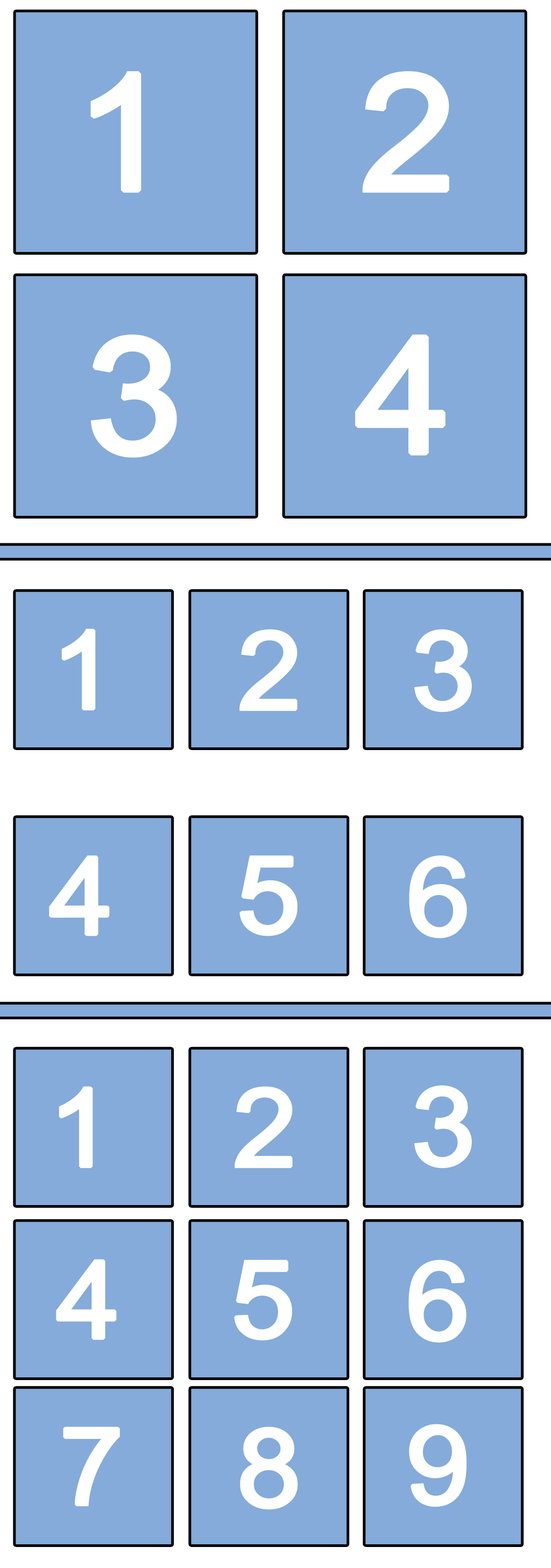
<style>
.page{position:relative;width:551px;height:1568px;background:#84abda}
.page>*{position:absolute;margin:0}
.t1{font:161.5px "ArialNarrow";color:#ffffff;font-weight:bold;scale:1.3 1}
.t2{font:107.7px "ArialNarrow";color:#ffffff;font-weight:bold;scale:1.3 1}
</style>
<div class="page">
<p class="t1" style="left:90px;top:71px;width:52px;height:122px">1</p>
<p class="t1" style="left:362px;top:71px;width:88px;height:122px">2</p>
<p class="t1" style="left:90px;top:334px;width:87px;height:124px">3</p>
<p class="t1" style="left:355px;top:334px;width:91px;height:122px">4</p>
<p class="t2" style="left:61px;top:628px;width:35px;height:83px">1</p>
<p class="t2" style="left:240px;top:629px;width:58px;height:82px">2</p>
<p class="t2" style="left:415px;top:629px;width:57px;height:83px">3</p>
<p class="t2" style="left:49px;top:855px;width:61px;height:81px">4</p>
<p class="t2" style="left:240px;top:855px;width:58px;height:81px">5</p>
<p class="t2" style="left:409px;top:855px;width:58px;height:84px">6</p>
<p class="t2" style="left:415px;top:1085px;width:57px;height:83px">3</p>
<p class="t2" style="left:59px;top:1086px;width:34px;height:82px">1</p>
<p class="t2" style="left:235px;top:1086px;width:58px;height:82px">2</p>
<p class="t2" style="left:56px;top:1259px;width:61px;height:81px">4</p>
<p class="t2" style="left:234px;top:1259px;width:58px;height:82px">5</p>
<p class="t2" style="left:409px;top:1259px;width:58px;height:84px">6</p>
<p class="t2" style="left:63px;top:1426px;width:57px;height:81px">7</p>
<p class="t2" style="left:240px;top:1426px;width:58px;height:84px">8</p>
<p class="t2" style="left:409px;top:1424px;width:58px;height:83px">9</p>
</div>
